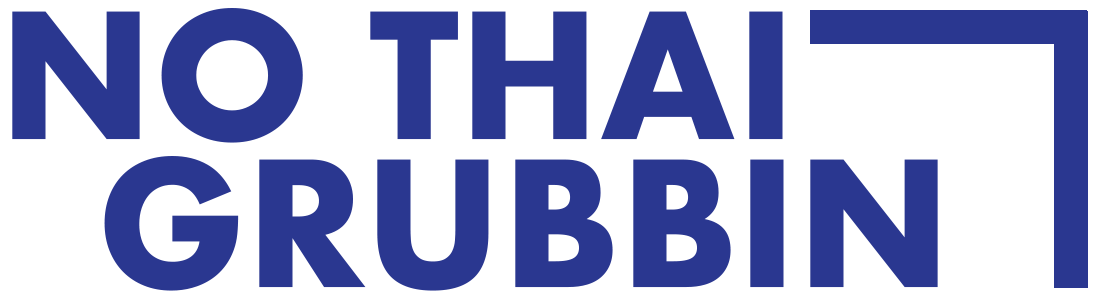
<style>
.page{position:relative;width:1100px;height:300px;background:#ffffff}
.page>*{position:absolute;margin:0}
.t1{font:169.4px/148.2px "Futura-Bold";color:#2a3790}
</style>
<div class="page">
<p class="t1" style="left:12px;top:8px;width:926px;height:283px">NO THAI<br>GRUBBIN</p>
</div>
